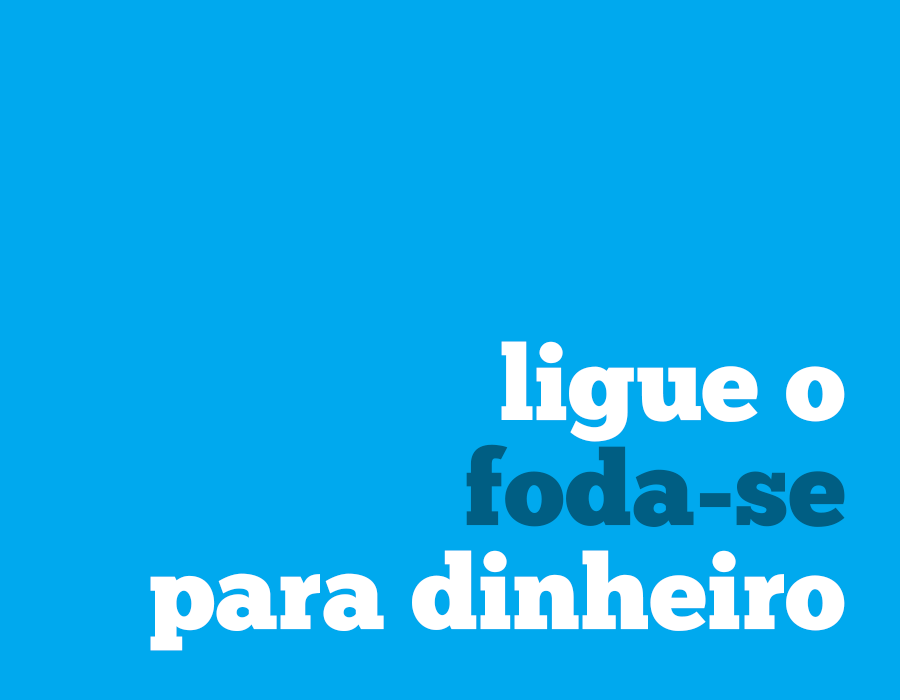
<style>
.page{position:relative;width:900px;height:700px;background:#00a9ee}
.page>*{position:absolute;margin:0}
.t1{font:104.5px/104.5px "ChunkFive-Roman";color:#ffffff}
.t2{font:104.5px/104.5px "ChunkFive-Roman";color:#005e83}
</style>
<div class="page">
<p class="t1" style="left:150px;top:341px;width:695px;height:310px;text-align:right">ligue o<br><span class="t2">foda-se<br></span>para dinheiro</p>
</div>
